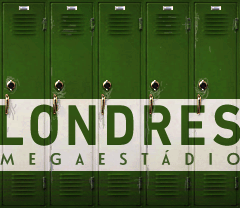
<style>
.page{position:relative;width:240px;height:208px}
.page>*{position:absolute;margin:0}
.t1{font:58.4px "DINNextLTPro-Bold";letter-spacing:0.1em;color:#303d0b;text-transform:uppercase;scale:0.87 1}
.t2{font:16.8px "LeHavreTitlingW01-Bold";letter-spacing:0.82em;color:#415b29;text-transform:uppercase}
</style>
<div class="page">
<p class="t1" style="left:0px;top:104px;width:241px;height:42px">londres</p>
<p class="t2" style="left:0px;top:150px;width:240px;height:15px">megaestádio</p>
</div>
